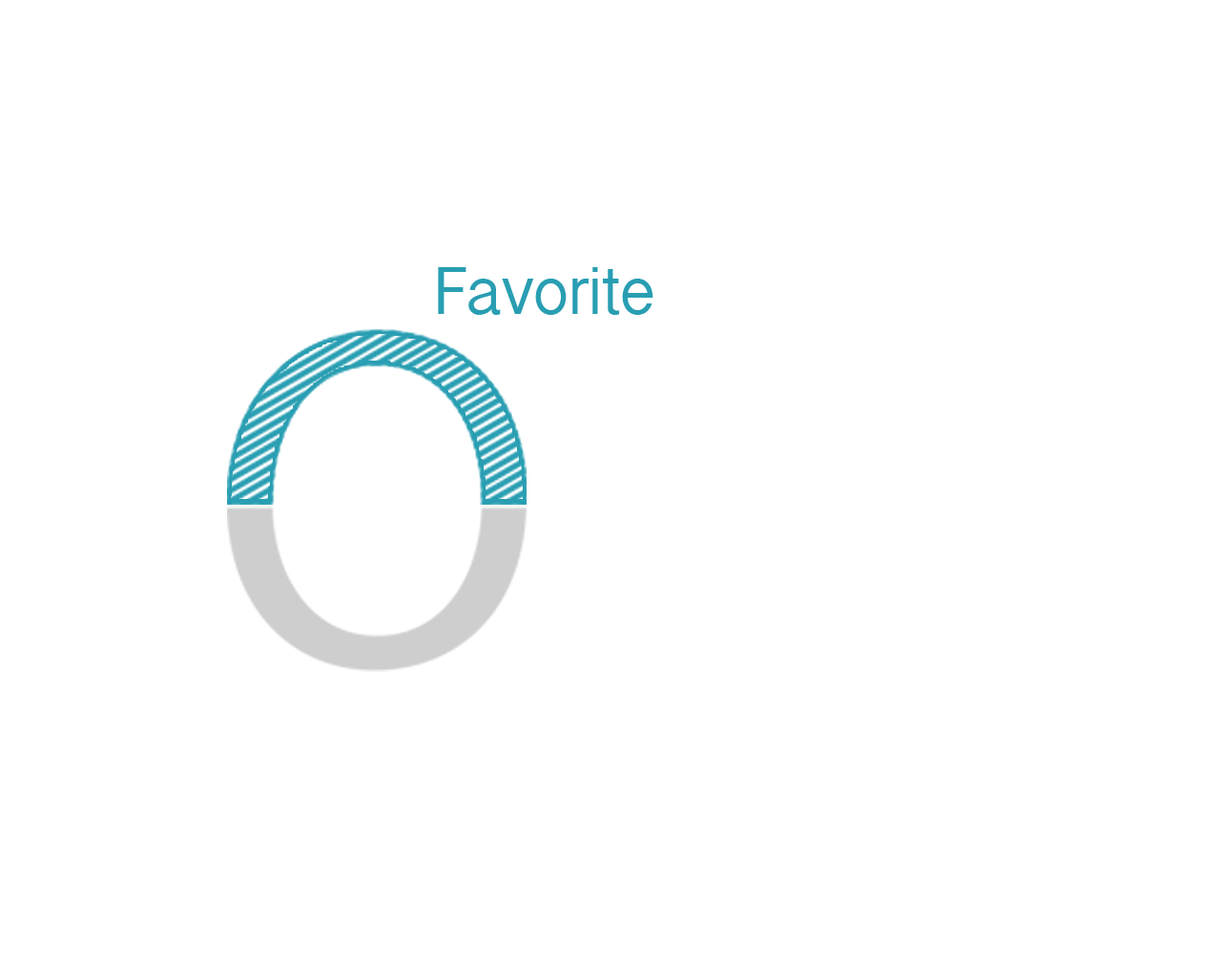
<style>
.page{position:relative;width:1221px;height:977px;background:#ffffff}
.page>*{position:absolute;margin:0}
.t1{font:70.3px "InaiMathi";color:#299eb2}
</style>
<div class="page">
<p class="t1" style="left:438px;top:267px;width:215px;height:48px">Favorite</p>
</div>
